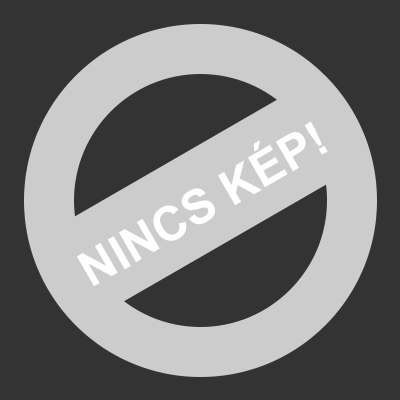
<style>
.page{position:relative;width:400px;height:400px;background:#333333}
.page>*{position:absolute;margin:0}
.t1{font:48px "Arial-BoldMT";color:#ffffff}
</style>
<div class="page">
<p class="t1" style="left:77px;top:121px;width:251px;height:166px;rotate:-30deg">NINCS KÉP!</p>
</div>
